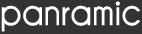
<style>
.page{position:relative;width:142px;height:34px;background:#333333}
.page>*{position:absolute;margin:0}
.t1{font:41px "Champagne&Limousines-Bold";color:#ffffff;scale:0.95 1}
</style>
<div class="page">
<p class="t1" style="left:1px;top:1px;width:140px;height:31px">panramic</p>
</div>
